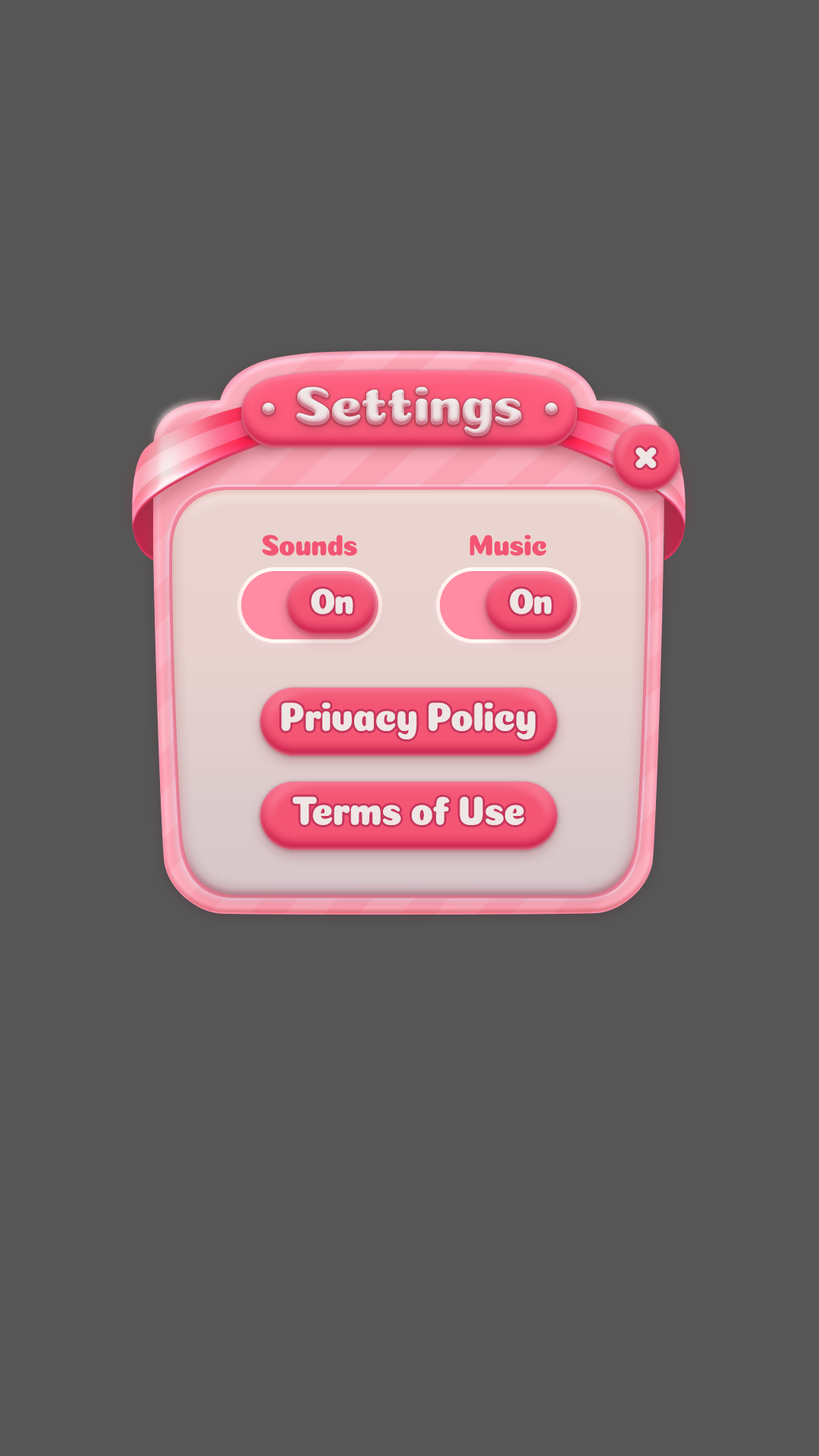
<style>
.page{position:relative;width:819px;height:1456px;background:#565656}
.page>*{position:absolute;margin:0}
.t1{font:54.6px "Coiny-Regular";letter-spacing:-0.025em}
.t2{font:29.8px "Coiny-Regular";letter-spacing:-0.025em;color:#f35573;scale:0.9 1}
.t3{font:36.4px "Coiny-Regular";letter-spacing:-0.05em;color:#eee6e4;scale:0.9 1}
.t4{font:40.9px "Coiny-Regular";letter-spacing:-0.025em;color:#eee6e4;scale:0.9 1}
</style>
<div class="page">
<p class="t1" style="left:297px;top:387px;width:225px;height:49px">Settings</p>
<p class="t2" style="left:262px;top:535px;width:95px;height:21px">Sounds</p>
<p class="t2" style="left:469px;top:535px;width:78px;height:21px">Music</p>
<p class="t3" style="left:311px;top:588px;width:42px;height:26px">On</p>
<p class="t3" style="left:510px;top:588px;width:42px;height:26px">On</p>
<p class="t4" style="left:281px;top:702px;width:254px;height:37px">Privacy Policy</p>
<p class="t4" style="left:293px;top:796px;width:231px;height:30px">Terms of Use</p>
</div>
